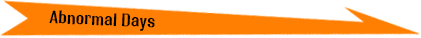
<style>
.page{position:relative;width:421px;height:38px;background:#ff7f02}
.page>*{position:absolute;margin:0}
.t1{font:18px "RolloutPlain";color:#000000}
</style>
<div class="page">
<p class="t1" style="left:49px;top:10px;width:106px;height:21px;rotate:2deg">Abnormal Days</p>
</div>
